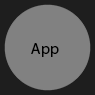
<style>
.page{position:relative;width:95px;height:95px;background:#818181}
.page>*{position:absolute;margin:0}
.t1{font:12px "MyriadPro-Regular";color:#000000}
</style>
<div class="page">
<p class="t1" style="left:31px;top:43px;width:28px;height:14px">App</p>
</div>
